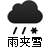
<style>
.page{position:relative;width:50px;height:48px;background:#ffffff}
.page>*{position:absolute;margin:0}
.t1{font:12px "OPPOSans-R";color:#000000}
</style>
<div class="page">
<p class="t1" style="left:8px;top:36px;width:34px;height:11px">雨夹雪</p>
</div>
